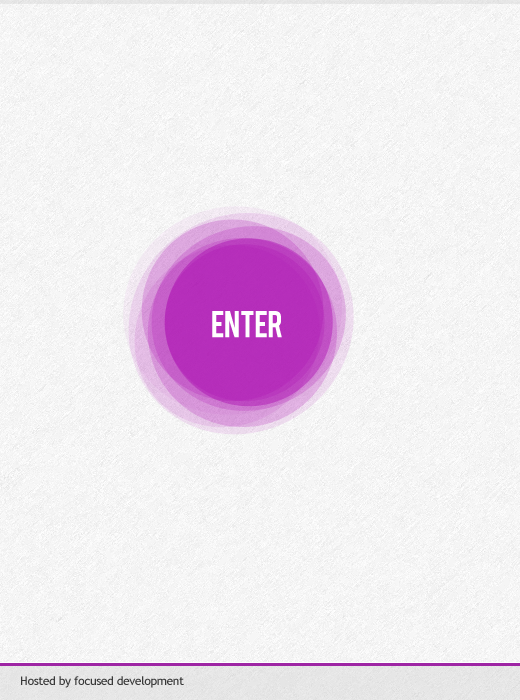
<style>
.page{position:relative;width:520px;height:700px}
.page>*{position:absolute;margin:0}
.t1{font:29px "Bebas";letter-spacing:-0.025em;color:#ffffff}
.t2{font:12px "TrebuchetMS";letter-spacing:-0.025em;color:#393939}
</style>
<div class="page">
<p class="t1" style="left:212px;top:311px;width:70px;height:27px">ENTER</p>
<p class="t2" style="left:21px;top:676px;width:163px;height:12px">Hosted by focused development</p>
</div>
